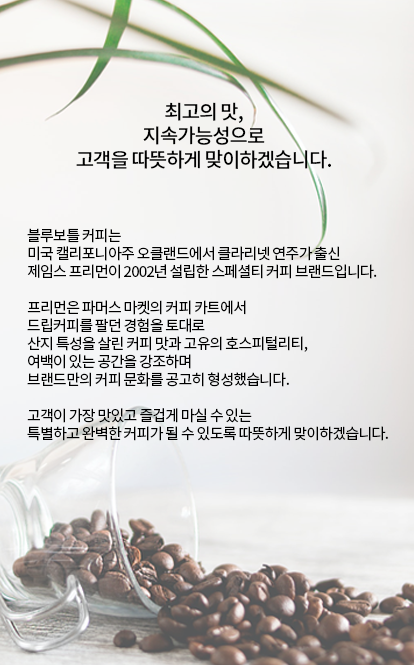
<style>
.page{position:relative;width:414px;height:665px}
.page>*{position:absolute;margin:0}
.t1{font:20px "NotoSansCJKkr-Medium";letter-spacing:-0.05em;color:#000000}
.t2{font:15px/18px "NotoSansCJKkr-Regular";letter-spacing:-0.05em;color:#000000}
</style>
<div class="page">
<p class="t1" style="left:76px;top:102px;width:255px;height:67px;text-align:center">최고의 맛,<br>지속가능성으로<br>고객을 따뜻하게 맞이하겠습니다.</p>
<p class="t2" style="left:27px;top:228px;width:361px;height:213px">블루보틀 커피는 <br>미국 캘리포니아주 오클랜드에서 클라리넷 연주가 출신 <br>제임스 프리먼이 2002년 설립한 스페셜티 커피 브랜드입니다.<br><br>프리먼은 파머스 마켓의 커피 카트에서 <br>드립커피를 팔던 경험을 토대로 <br>산지 특성을 살린 커피 맛과 고유의 호스피털리티, <br>여백이 있는 공간을 강조하며<br>브랜드만의 커피 문화를 공고히 형성했습니다.<br><br>고객이 가장 맛있고 즐겁게 마실 수 있는 <br>특별하고 완벽한 커피가 될 수 있도록 따뜻하게 맞이하겠습니다.</p>
</div>
